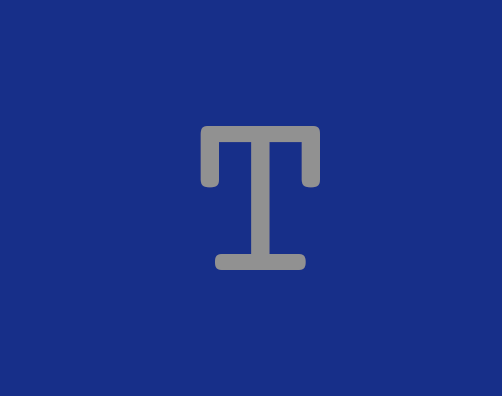
<style>
.page{position:relative;width:502px;height:396px;background:#172f89}
.page>*{position:absolute;margin:0}
.t1{font:247.8px "CourierPrime";color:#919191;text-transform:uppercase}
</style>
<div class="page">
<p class="t1" style="left:200px;top:126px;width:120px;height:144px">T</p>
</div>
